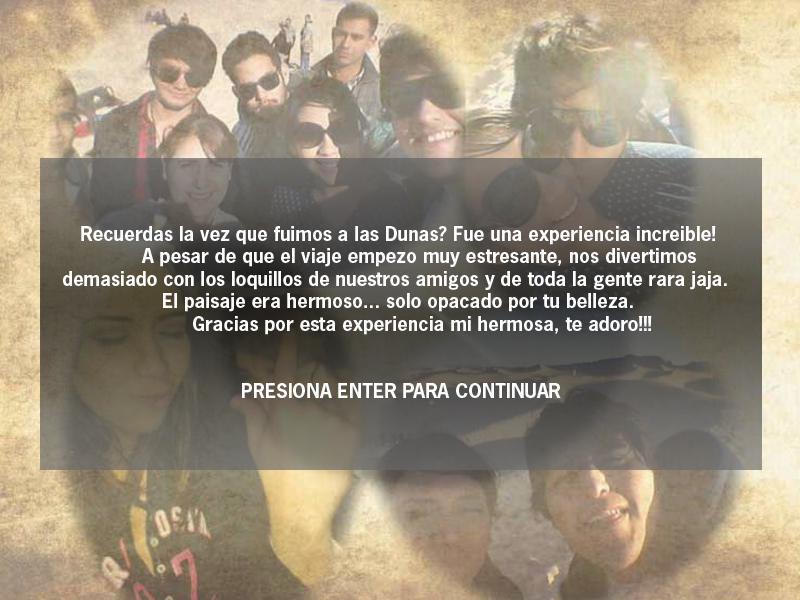
<style>
.page{position:relative;width:800px;height:600px}
.page>*{position:absolute;margin:0}
.t1{font:18.7px "NewsGothicStd-Bold";color:#fefeff}
</style>
<div class="page">
<p class="t1" style="left:63px;top:226px;width:664px;height:172px;text-align:center">Recuerdas la vez que fuimos a las Dunas? Fue una experiencia increible!<br>  A pesar de que el viaje empezo muy estresante, nos divertimos <br>demasiado con los loquillos de nuestros amigos y de toda la gente rara jaja. <br>El paisaje era hermoso... solo opacado por tu belleza.<br>   Gracias por esta experiencia mi hermosa, te adoro!!! <br><br><br> PRESIONA ENTER PARA CONTINUAR</p>
</div>
